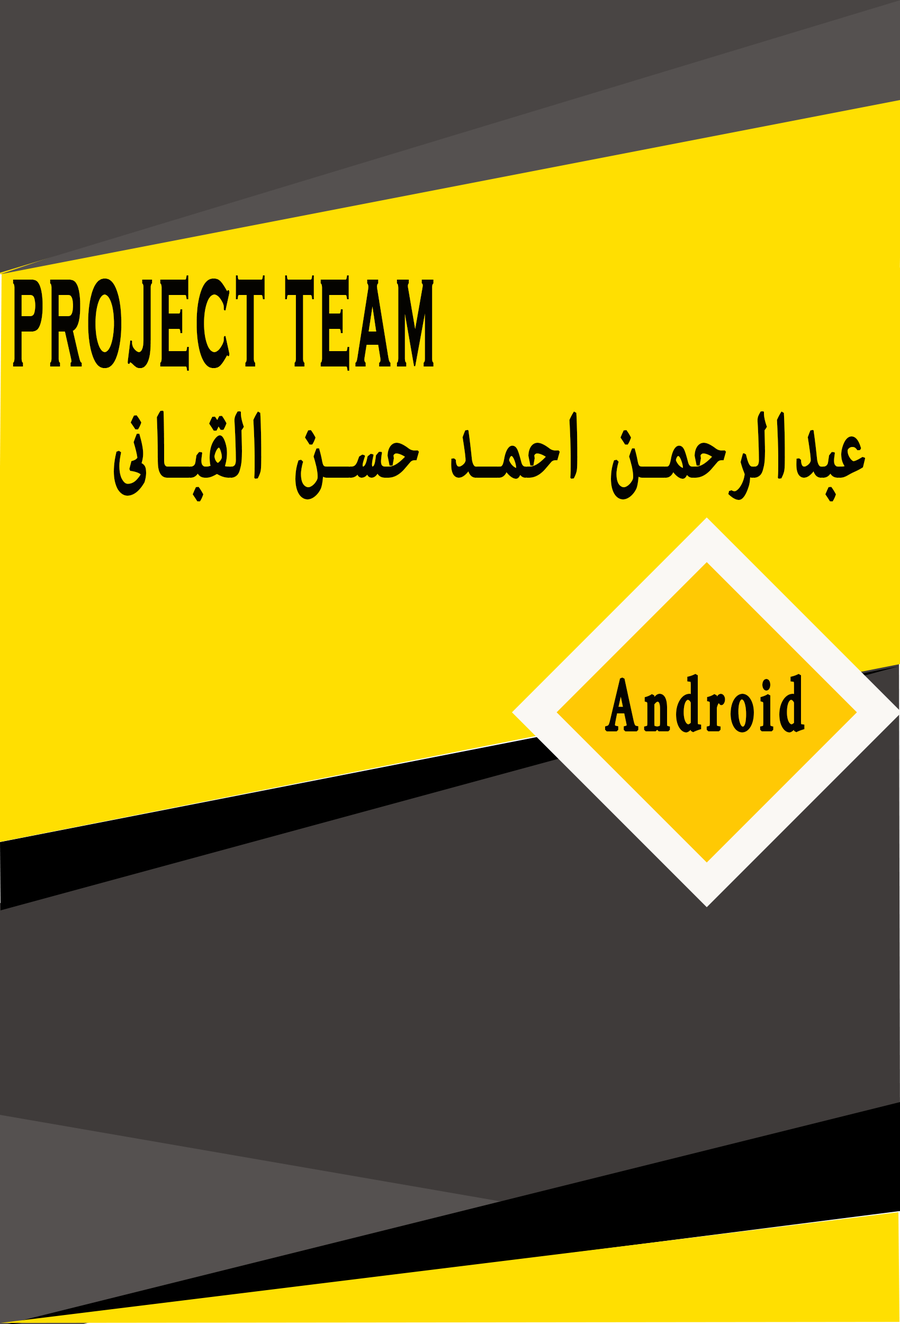
<style>
.page{position:relative;width:900px;height:1324px;background:#ffdf01}
.page>*{position:absolute;margin:0}
.t1{font:127.1px "CopperplateGothic-Bold";letter-spacing:0.1em;color:#040300;text-transform:uppercase;font-weight:bold;scale:0.33 1}
.t2{font:127px "AdobeArabic-Regular";letter-spacing:0.1em;color:#040300;text-transform:uppercase;font-weight:bold;scale:0.56 1}
.t3{font:107.2px "AdobeArabic-Regular";letter-spacing:0.1em;color:#040300;font-weight:bold;scale:0.58 1}
</style>
<div class="page">
<p class="t1" style="left:13px;top:275px;width:421px;height:96px">Project Team</p>
<p class="t2" style="left:114px;top:411px;width:752px;height:91px">عبدالرحمن احمد حسن القبانى</p>
<p class="t3" style="left:605px;top:674px;width:200px;height:59px">Android</p>
</div>
